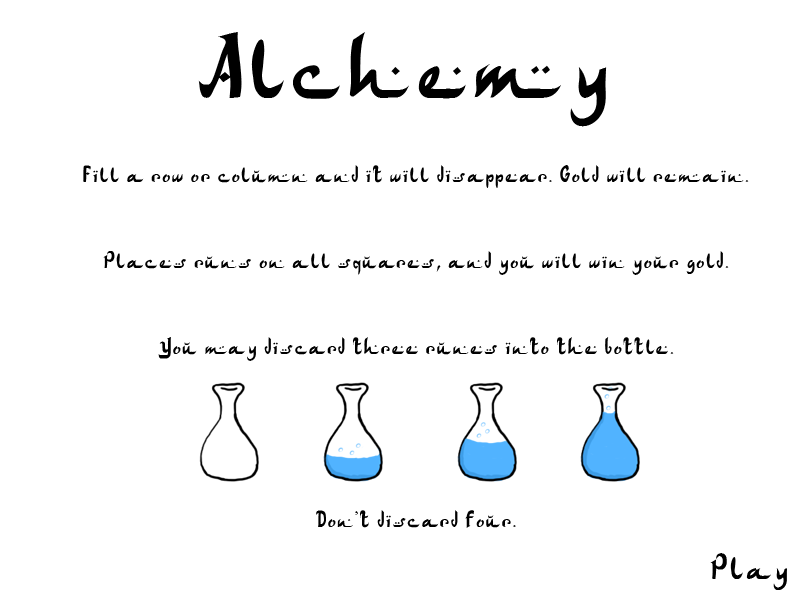
<style>
.page{position:relative;width:800px;height:600px;background:#ffffff}
.page>*{position:absolute;margin:0}
.t1{font:96px "ArabDancesMediumItalic";color:#000000}
.t2{font:24px "ArabDancesMediumItalic";color:#000000}
.t3{font:36px "ArabDancesMediumItalic";color:#000000}
</style>
<div class="page">
<p class="t1" style="left:198px;top:32px;width:409px;height:95px">Alchemy</p>
<p class="t2" style="left:83px;top:165px;width:666px;height:363px;text-align:center">Fill a row or column and it will disappear. Gold will remain.<br><br><br>Places runs on all squares, and you will win your gold.<br> <br><br>You may discard three runes into the bottle.<br><br><br><br><br><br>Don’t discard four.</p>
<p class="t3" style="left:710px;top:553px;width:77px;height:37px">Play</p>
</div>
